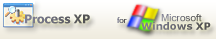
<style>
.page{position:relative;width:216px;height:39px}
.page>*{position:absolute;margin:0}
.t1{font:12px "Tahoma-Bold"}
.t2{font:8px "MicrosoftSansSerif";color:#58585c}
.t3{font:10px "MicrosoftSansSerif";color:#6e6e7c}
.t4{font:10px "Verdana-Bold"}
</style>
<div class="page">
<p class="t1" style="left:25px;top:14px;width:65px;height:10px">Process XP</p>
<p class="t2" style="left:117px;top:17px;width:10px;height:6px">for</p>
<p class="t3" style="left:161px;top:14px;width:41px;height:8px">Microsoft</p>
<p class="t4" style="left:141px;top:22px;width:70px;height:8px">Windows XP</p>
</div>
